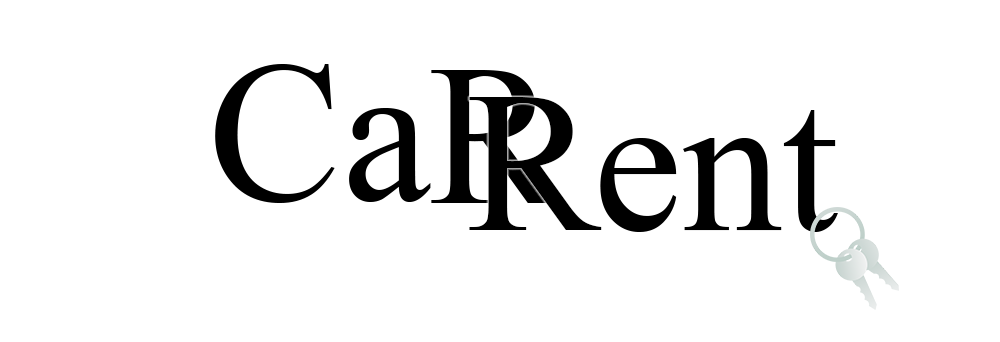
<style>
.page{position:relative;width:1000px;height:342px;background:#ffffff}
.page>*{position:absolute;margin:0}
.t1{font:200px "TimesNewRomanPSMT";color:#000000}
</style>
<div class="page">
<p class="t1" style="left:215px;top:64px;width:216px;height:139px">Ca</p>
<p class="t1" style="left:431px;top:70px;width:133px;height:133px">R</p>
<p class="t1" style="left:469px;top:97px;width:133px;height:133px">R</p>
<p class="t1" style="left:600px;top:110px;width:238px;height:122px">ent</p>
</div>
